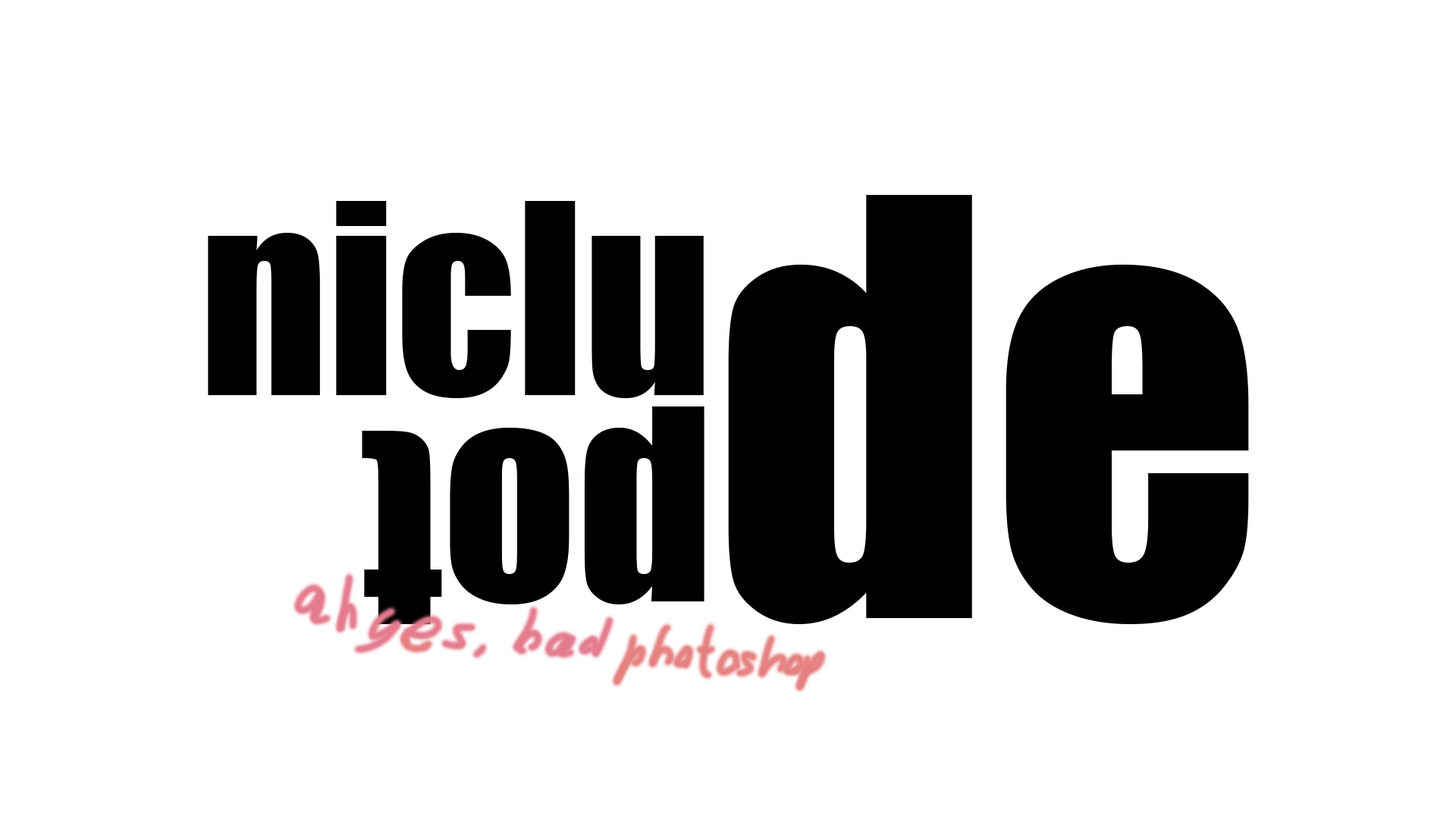
<style>
.page{position:relative;width:1456px;height:819px;background:#ffffff}
.page>*{position:absolute;margin:0}
.t1{font:535px "Impact";color:#000000}
.t2{font:245.6px "Impact";color:#000000}
.t3{font:263.1px "Impact";color:#000000}
</style>
<div class="page">
<p class="t1" style="left:728px;top:195px;width:521px;height:429px">de</p>
<p class="t2" style="left:208px;top:201px;width:496px;height:197px">niclu</p>
<p class="t3" style="left:362px;top:406px;width:342px;height:218px;rotate:180deg">pot</p>
</div>
